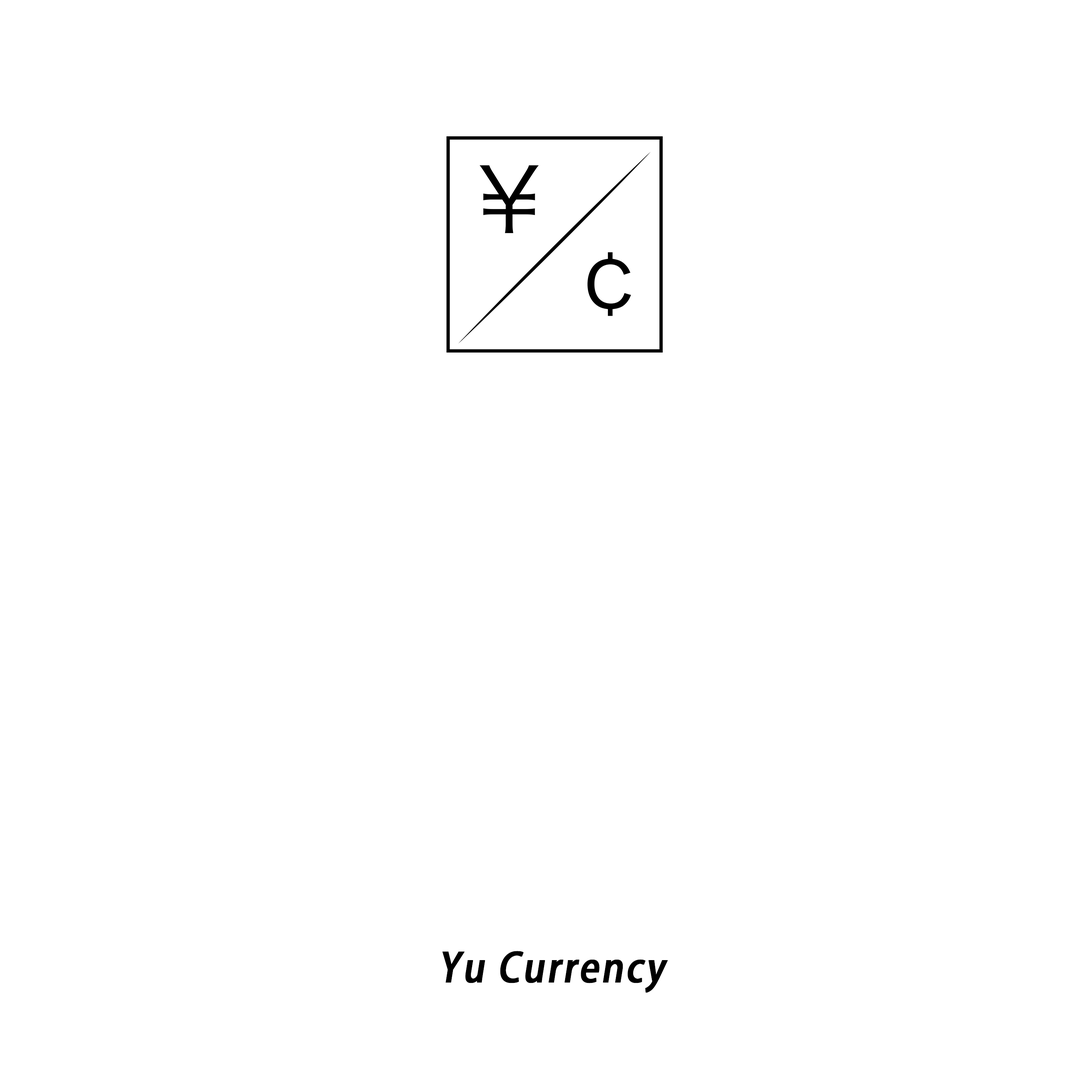
<style>
.page{position:relative;width:1092px;height:1092px;background:#ffffff}
.page>*{position:absolute;margin:0}
.t1{font:40px "KozGoPro-Medium";letter-spacing:0.05em;color:#000000;font-weight:bold;font-style:italic;scale:0.9 1}
</style>
<div class="page">
<p class="t1" style="left:442px;top:951px;width:226px;height:42px">Yu Currency</p>
</div>
